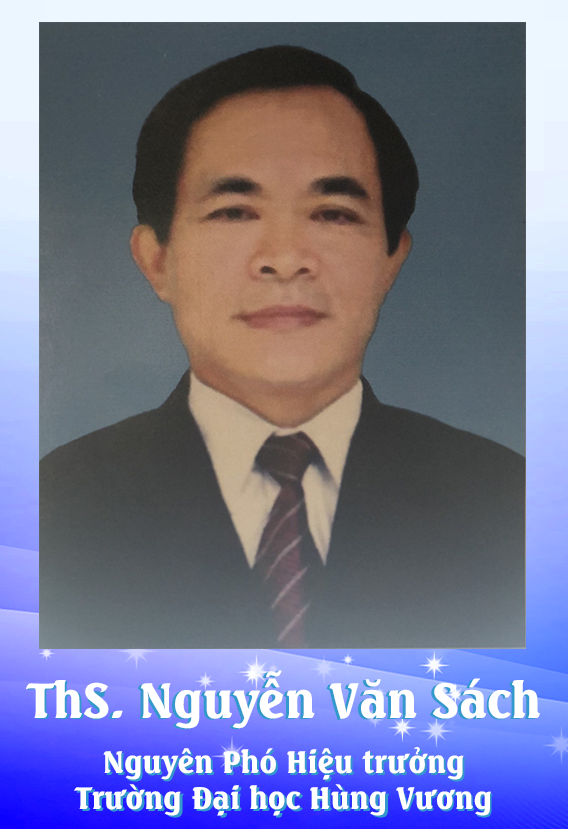
<style>
.page{position:relative;width:568px;height:829px}
.page>*{position:absolute;margin:0}
.t1{font:48px "UTMSeagullBold";color:#ffffff}
.t2{font:48px "UTMSeagullBold"}
.t3{font:30px "UTMSeagullBold";color:#ffffff}
.t4{font:30px "UTMSeagullBold"}
</style>
<div class="page">
<p class="t1" style="left:25px;top:670px;width:515px;height:59px">ThS. Nguyễn Văn Sách</p>
<p class="t2" style="left:27px;top:671px;width:510px;height:59px">Ths. Nguyễn Văn Sách</p>
<p class="t3" style="left:74px;top:747px;width:417px;height:69px;text-align:center">Nguyên Phó Hiệu trưởng<br>Trường Đại học Hùng Vương</p>
<p class="t4" style="left:76px;top:749px;width:417px;height:69px;text-align:center">Nguyên Phó Hiệu trưởng<br>Trường Đại học Hùng vương</p>
</div>
